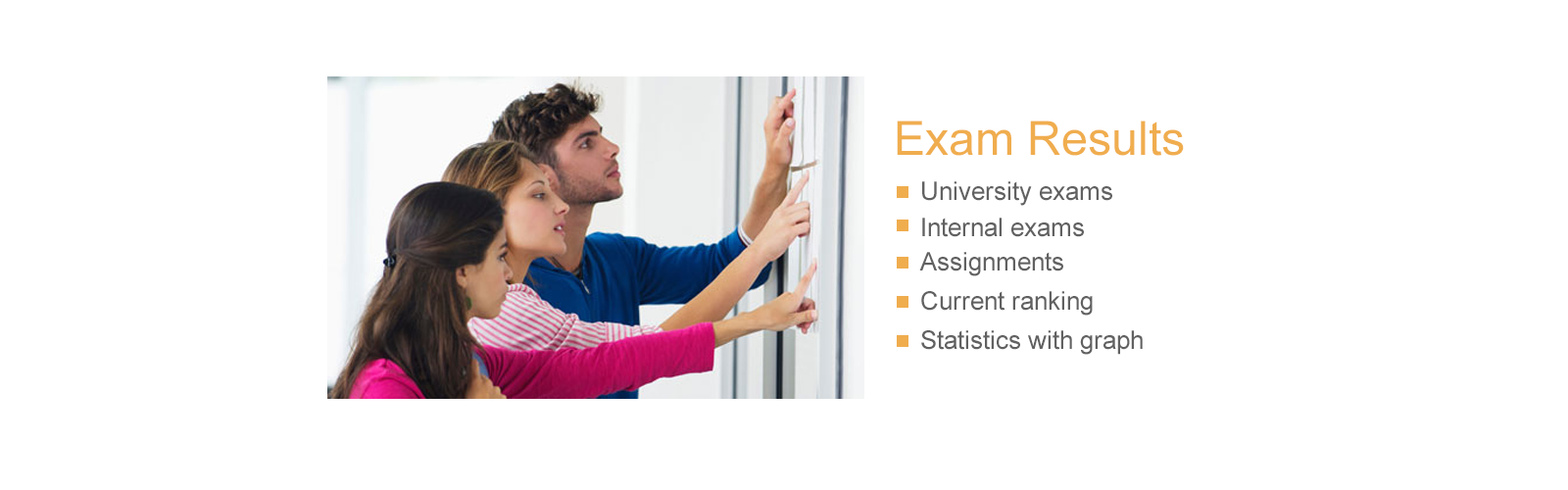
<style>
.page{position:relative;width:1568px;height:490px;background:#ffffff}
.page>*{position:absolute;margin:0}
.t1{font:47px "ArialMT";color:#f0ad4e}
.t2{font:25.5px "ArialMT";color:#616161}
</style>
<div class="page">
<p class="t1" style="left:897px;top:121px;width:287px;height:35px">Exam Results</p>
<p class="t2" style="left:922px;top:181px;width:190px;height:25px">University exams</p>
<p class="t2" style="left:922px;top:218px;width:162px;height:19px">Internal exams</p>
<p class="t2" style="left:919px;top:252px;width:144px;height:24px">Assignments</p>
<p class="t2" style="left:921px;top:291px;width:172px;height:25px">Current ranking</p>
<p class="t2" style="left:921px;top:330px;width:222px;height:25px">Statistics with graph</p>
</div>
